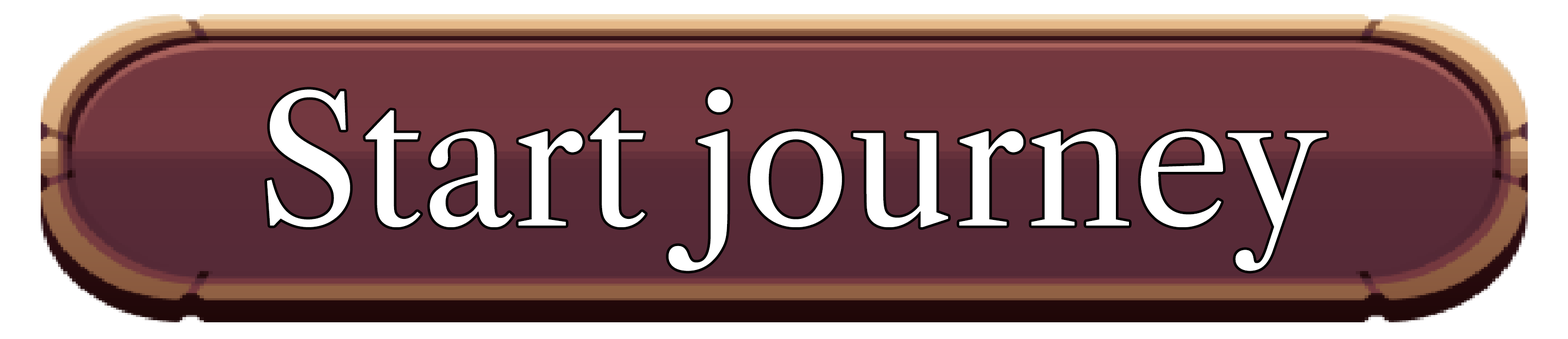
<style>
.page{position:relative;width:1568px;height:339px;background:#ffffff}
.page>*{position:absolute;margin:0}
.t1{font:174.2px "LibreCaslonText-Regular";color:#ffffff}
</style>
<div class="page">
<p class="t1" style="left:267px;top:89px;width:1060px;height:182px">Start journey</p>
</div>
